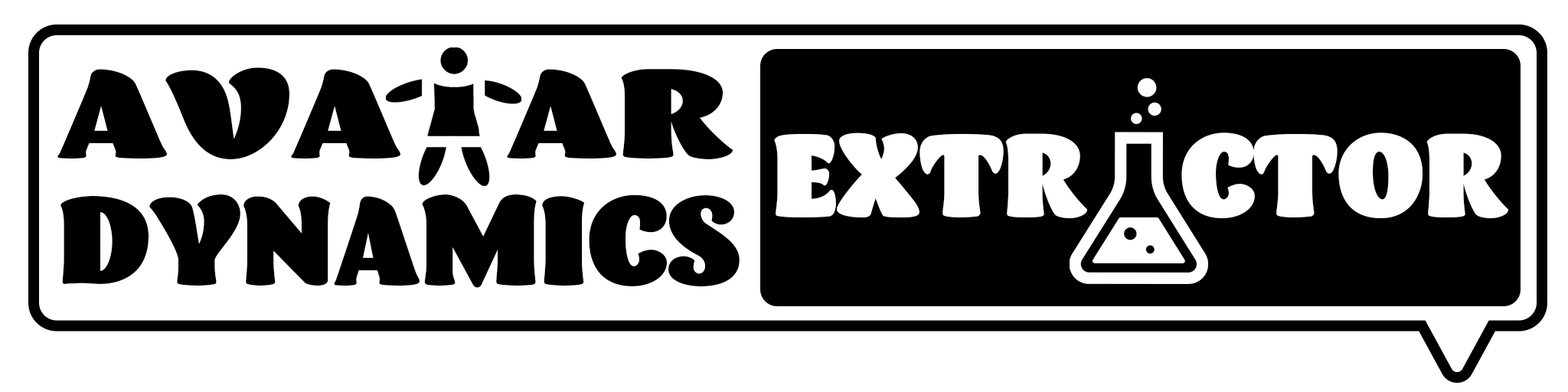
<style>
.page{position:relative;width:1568px;height:392px;background:#ffffff}
.page>*{position:absolute;margin:0}
.t1{font:127.7px/127.7px "BarricadaPro";color:#000000;scale:1.28 1}
.t2{font:127.7px/127.7px "BarricadaPro";color:#000000}
.t3{font:119.3px "BarricadaPro";color:#ffffff}
</style>
<div class="page">
<p class="t1" style="left:57px;top:67px;width:683px;height:221px">AVA     AR<span class="t2"> <br>DYNAMICS</span></p>
<p class="t3" style="left:774px;top:132px;width:735px;height:86px">EXTR      CTOR</p>
</div>
